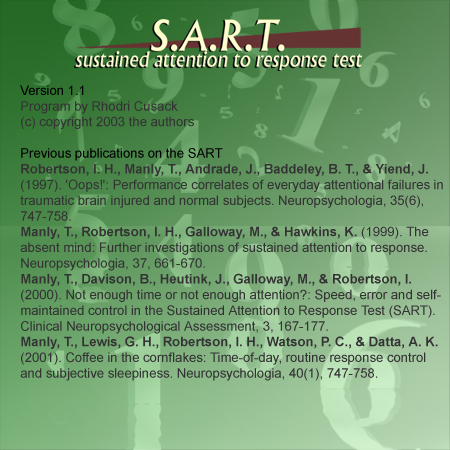
<style>
.page{position:relative;width:450px;height:450px}
.page>*{position:absolute;margin:0}
.t1{font:13.1px "ArialMT";color:#333333}
.t2{font:13.1px "ArialMT";color:#000000}
.t3{font:13.1px "Arial-BoldMT";color:#333333}
</style>
<div class="page">
<p class="t1" style="left:20px;top:85px;width:423px;height:296px"><span class="t2">Version 1.1<br></span>Program by Rhodri Cusack <br>(c) copyright 2003 the authors<br><br><span class="t2">Previous publications on the SART<br></span><span class="t3">Robertson, I. H., Manly, T., Andrade, J., Baddeley, B. T., &amp; Yiend, J. </span>(1997). 'Oops!': Performance correlates of everyday attentional failures in traumatic brain injured and normal subjects. Neuropsychologia, 35(6), 747-758.<br><span class="t3">Manly, T., Robertson, I. H., Galloway, M., &amp; Hawkins, K. </span>(1999). The absent mind: Further investigations of sustained attention to response. Neuropsychologia, 37, 661-670.<br><span class="t3">Manly, T., Davison, B., Heutink, J., Galloway, M., &amp; Robertson, I. </span>(2000). Not enough time or not enough attention?: Speed, error and self-maintained control in the Sustained Attention to Response Test (SART). Clinical Neuropsychological Assessment, 3, 167-177.<br><span class="t3">Manly, T., Lewis, G. H., Robertson, I. H., Watson, P. C., &amp; Datta, A. K. </span>(2001). Coffee in the cornflakes: Time-of-day, routine response control and subjective sleepiness. Neuropsychologia, 40(1), 747-758.</p>
</div>
